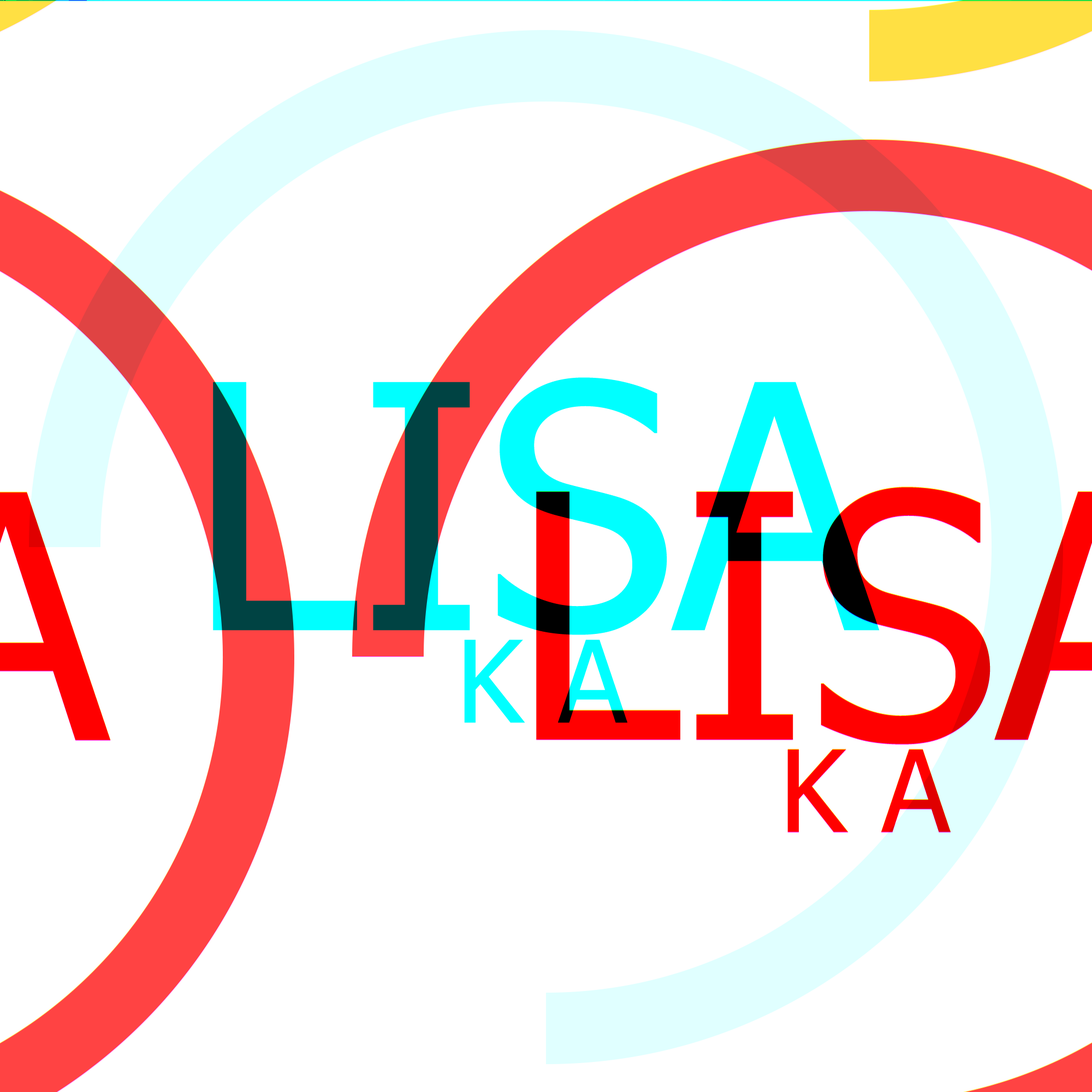
<style>
.page{position:relative;width:1092px;height:1092px;background:#ffffff}
.page>*{position:absolute;margin:0}
.t1{font:341.2px "Tahoma"}
.t2{font:113.7px "Tahoma";color:#00ffff}
</style>
<div class="page">
<p class="t1" style="left:213px;top:376px;width:667px;height:258px">LISA</p>
<p class="t2" style="left:464px;top:638px;width:163px;height:84px">K A</p>
</div>
